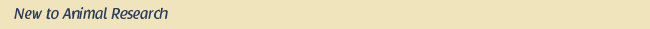
<style>
.page{position:relative;width:650px;height:29px;background:#f0e4bc}
.page>*{position:absolute;margin:0}
.t1{font:15px "RaspoutineClassic";color:#2a3d5b}
</style>
<div class="page">
<p class="t1" style="left:14px;top:7px;width:154px;height:13px">New to Animal Research</p>
</div>
